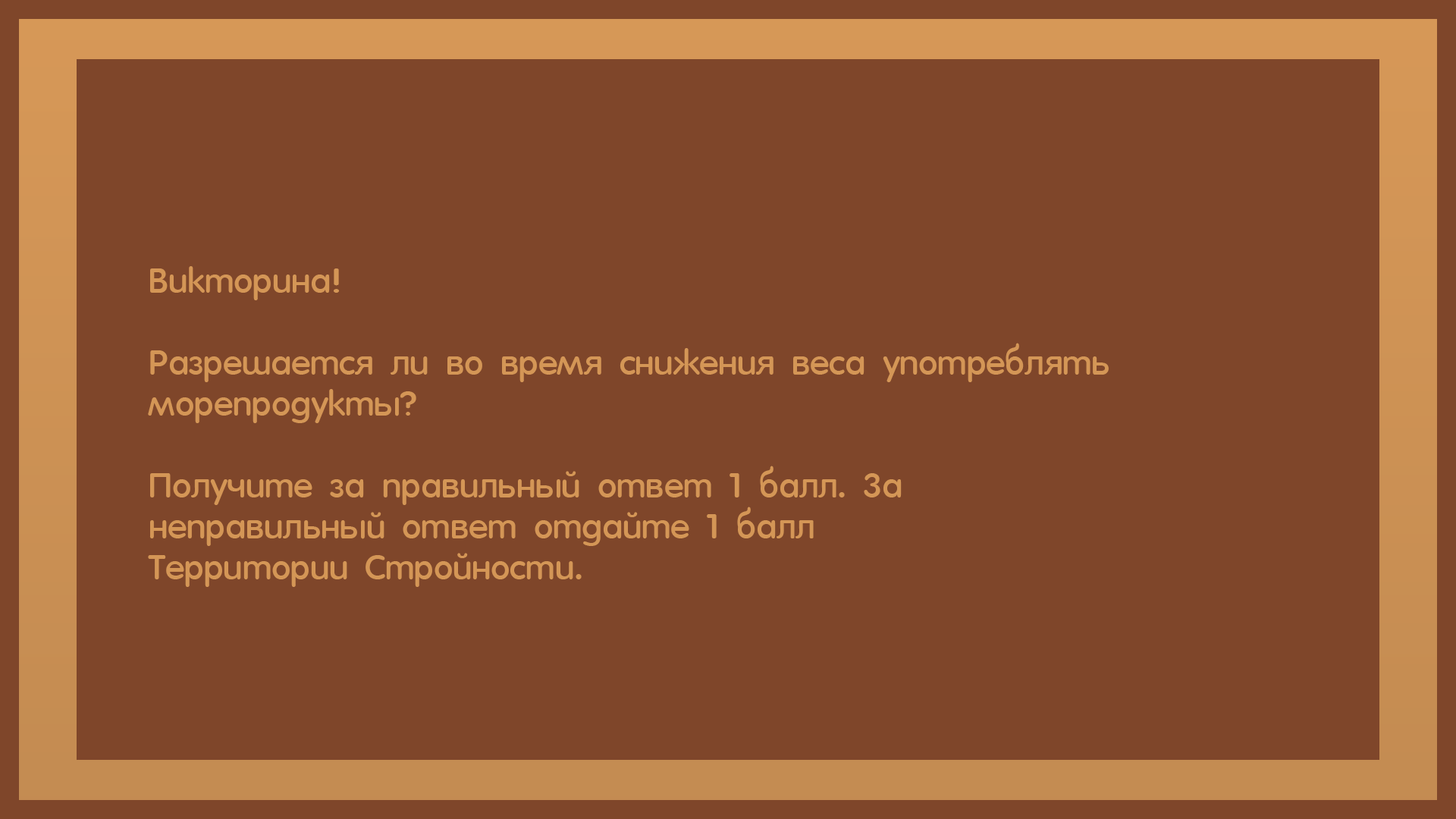
<style>
.page{position:relative;width:1456px;height:819px;background:#7f462a}
.page>*{position:absolute;margin:0}
.t1{font:34.1px "18VAGRoundedMNormal";color:#d49656}
</style>
<div class="page">
<p class="t1" style="left:148px;top:266px;width:961px;height:321px">Викторина!<br><br>Разрешается ли во время снижения веса употреблять морепродукты?<br><br>Получите за правильный ответ 1 балл. За<br>неправильный ответ отдайте 1 балл <br>Территории Стройности.</p>
</div>
